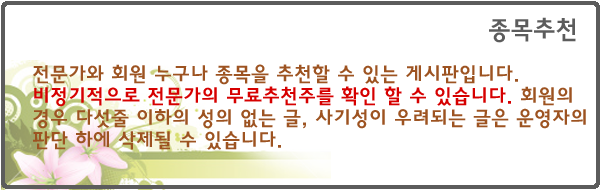
<style>
.page{position:relative;width:600px;height:190px;background:#ffffff}
.page>*{position:absolute;margin:0}
.t1{font:25px "HaanYGodic24";color:#5c5c5c}
.t2{font:20px/22px "HaanYGodic24";color:#9d5321}
.t3{font:20px/22px "HaanYGodic24";color:#d60000}
</style>
<div class="page">
<p class="t1" style="left:489px;top:17px;width:87px;height:26px">종목추천</p>
<p class="t2" style="left:33px;top:64px;width:553px;height:86px">전문가와 회원 누구나 종목을 추천할 수 있는 게시판입니다. <span class="t3">비정기적으로 전문가의 무료추천주를 확인 할 수 있습니다.</span> 회원의 경우 다섯줄 이하의 성의 없는 글, 사기성이 우려되는 글은 운영자의 판단 하에 삭제될 수 있습니다.</p>
</div>
